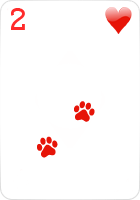
<style>
.page{position:relative;width:140px;height:200px;background:#ffffff}
.page>*{position:absolute;margin:0}
.t1{font:26px "CardCharacters";color:#ff2b2b}
</style>
<div class="page">
<p class="t1" style="left:11px;top:8px;width:14px;height:22px">2</p>
</div>
